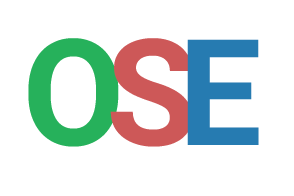
<style>
.page{position:relative;width:294px;height:196px;background:#ffffff}
.page>*{position:absolute;margin:0}
.t1{font:148px "Roboto-Bold";letter-spacing:-0.125em;color:#19a74b}
.t2{font:148px "Roboto-Bold";letter-spacing:-0.125em;color:#c64747}
.t3{font:148px "Roboto-Bold";letter-spacing:-0.125em;color:#196ca7}
</style>
<div class="page">
<p class="t1" style="left:28px;top:38px;width:231px;height:109px">O<span class="t2">S</span><span class="t3">E</span></p>
</div>
